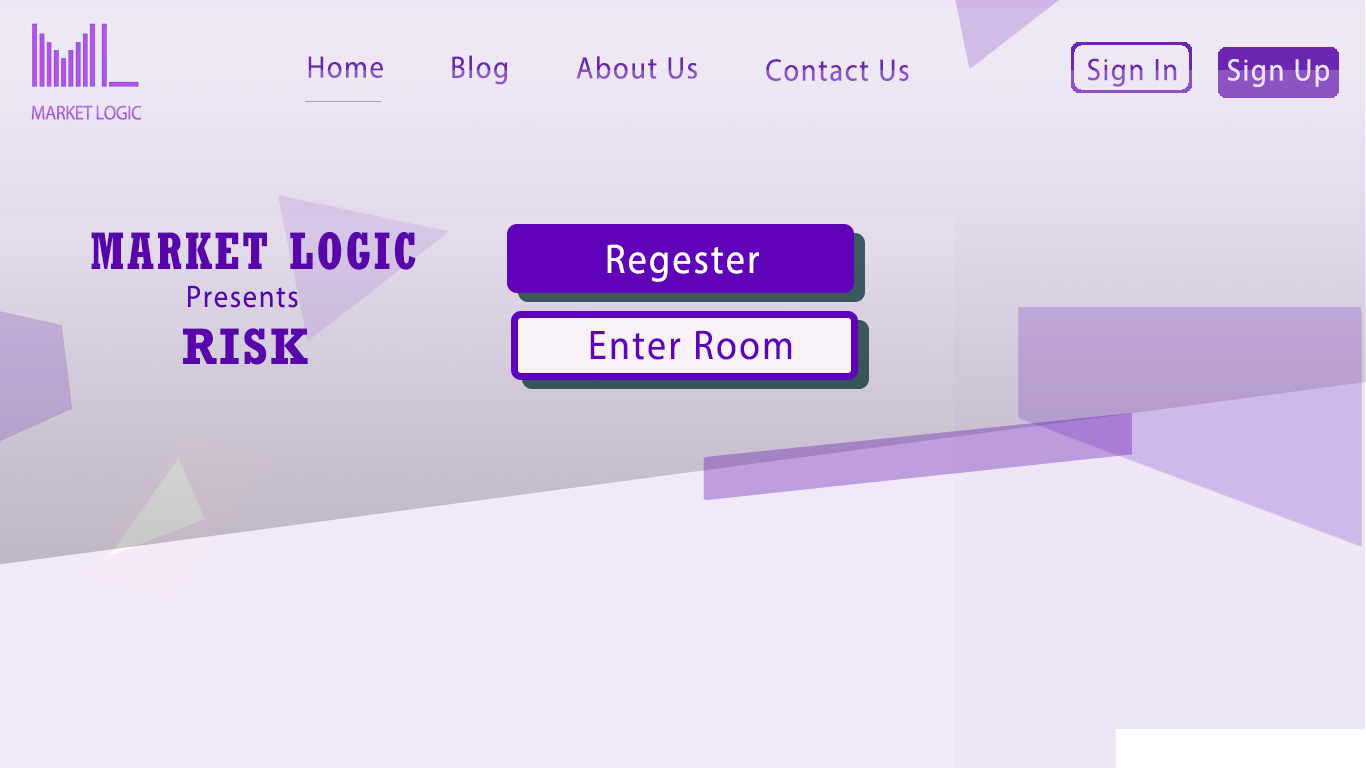
<style>
.page{position:relative;width:1366px;height:768px;background:#f1e9f9}
.page>*{position:absolute;margin:0}
.t1{font:31.1px "MyriadPro-Regular";letter-spacing:0.06em;scale:0.91 1}
.t2{font:31.1px "MyriadPro-Regular";letter-spacing:0.06em;color:#fdfdfe;scale:0.91 1}
.t3{font:19.9px "MyriadPro-Regular";letter-spacing:-0.02em;scale:0.91 1}
.t4{font:51.9px "Rockwell-CondensedBold";letter-spacing:0.06em;color:#5806a9;scale:0.91 1}
.t5{font:41.5px "MyriadPro-Regular";letter-spacing:0.06em;color:#ffffff;scale:0.91 1}
.t6{font:31.1px "MyriadPro-Regular";letter-spacing:0.06em;color:#5806a9;scale:0.91 1}
.t7{font:51.9px "Rockwell-Bold";letter-spacing:0.06em;color:#5806a9;scale:0.91 1}
.t8{font:41.5px "MyriadPro-Regular";letter-spacing:0.06em;color:#6002b8;scale:0.91 1}
</style>
<div class="page">
<p class="t1" style="left:308px;top:56px;width:75px;height:22px">Home</p>
<p class="t1" style="left:452px;top:55px;width:56px;height:30px">Blog</p>
<p class="t1" style="left:576px;top:56px;width:121px;height:23px">About Us</p>
<p class="t1" style="left:766px;top:59px;width:143px;height:22px">Contact Us</p>
<p class="t1" style="left:1087px;top:58px;width:90px;height:29px">Sign In</p>
<p class="t2" style="left:1228px;top:59px;width:101px;height:28px">Sign Up</p>
<p class="t3" style="left:31px;top:105px;width:111px;height:15px">MARKET LOGIC</p>
<p class="t4" style="left:91px;top:232px;width:325px;height:38px">MARKET LOGIC</p>
<p class="t5" style="left:607px;top:244px;width:152px;height:38px">Regester</p>
<p class="t6" style="left:188px;top:285px;width:110px;height:23px">Presents</p>
<p class="t7" style="left:183px;top:328px;width:125px;height:37px">RISK</p>
<p class="t8" style="left:590px;top:330px;width:202px;height:30px">Enter Room</p>
</div>
